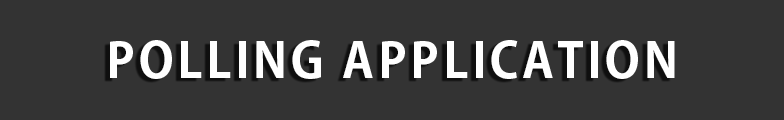
<style>
.page{position:relative;width:784px;height:120px;background:#333333}
.page>*{position:absolute;margin:0}
.t1{font:48px "KozGoPr6N-Bold";letter-spacing:0.08em;color:#ffffff}
</style>
<div class="page">
<p class="t1" style="left:110px;top:40px;width:565px;height:39px">POLLING APPLICATION</p>
</div>
